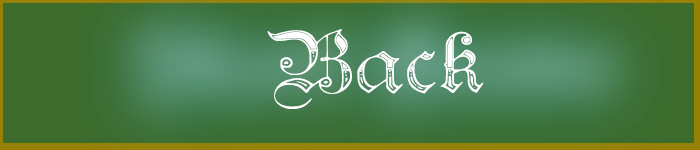
<style>
.page{position:relative;width:700px;height:150px}
.page>*{position:absolute;margin:0}
.t1{font:72px "TeutonicNo4-DemiBold";color:#ffffff}
</style>
<div class="page">
<p class="t1" style="left:267px;top:29px;width:217px;height:80px">Back</p>
</div>
